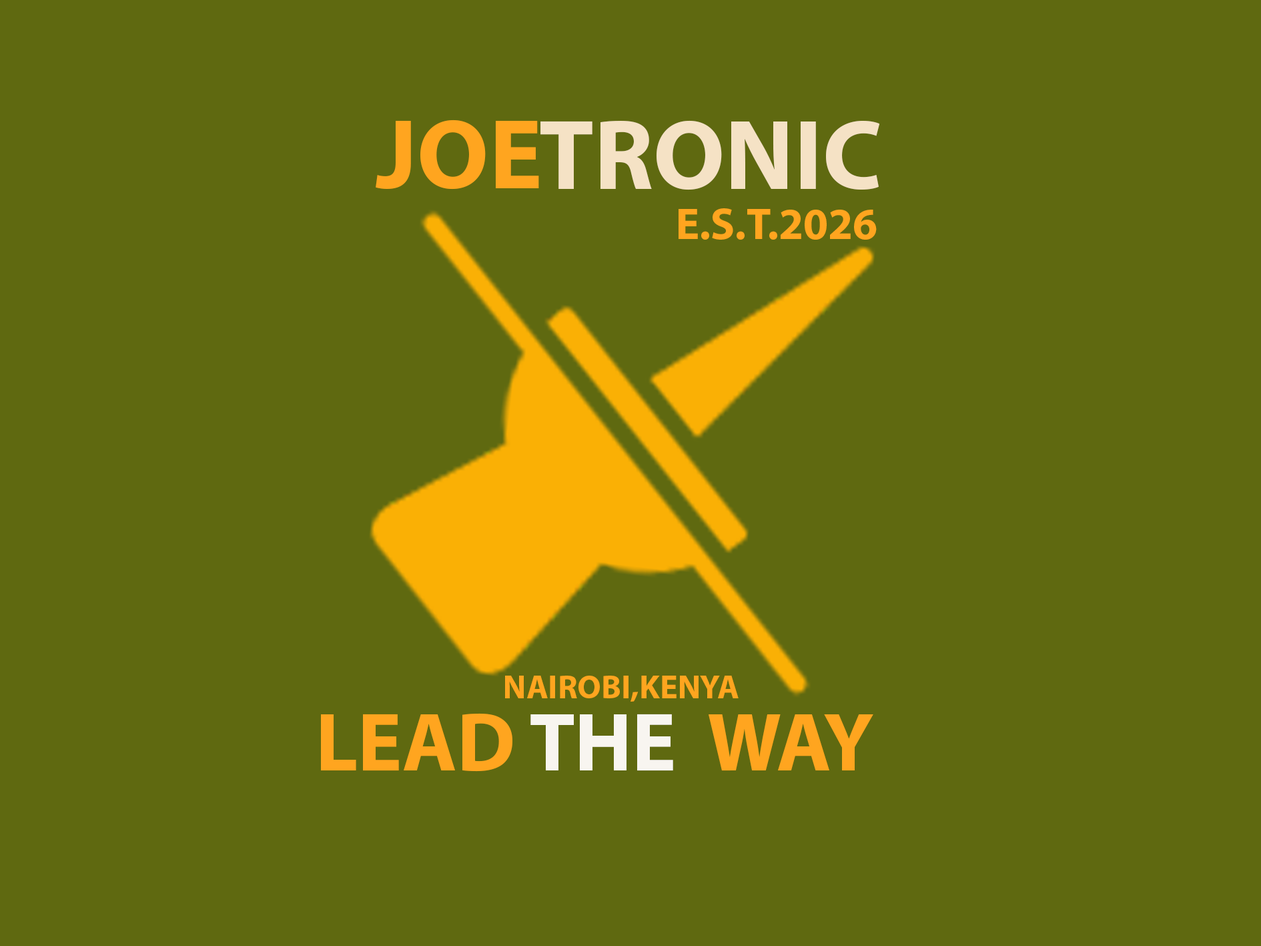
<style>
.page{position:relative;width:1261px;height:946px;background:#5f6910}
.page>*{position:absolute;margin:0}
.t1{font:100.1px "MyriadPro-Bold";color:#ffa51f}
.t2{font:100.1px "MyriadPro-Bold";color:#f5e2c5}
.t3{font:44.5px "MyriadPro-Bold";color:#ffa51f}
.t4{font:33.4px "MyriadPro-Bold";color:#ffa51f}
.t5{font:83.4px "MyriadPro-Bold";color:#ffa51f}
.t6{font:83.4px "MyriadPro-Bold";color:#f8f5f0}
</style>
<div class="page">
<p class="t1" style="left:376px;top:119px;width:163px;height:71px">JOE</p>
<p class="t2" style="left:540px;top:120px;width:340px;height:70px">TRONIC</p>
<p class="t3" style="left:679px;top:208px;width:198px;height:32px">E.S.T.2026</p>
<p class="t4" style="left:505px;top:675px;width:234px;height:26px">NAIROBI,KENYA</p>
<p class="t5" style="left:321px;top:713px;width:552px;height:58px">LEAD <span class="t6">THE </span> WAY</p>
</div>
